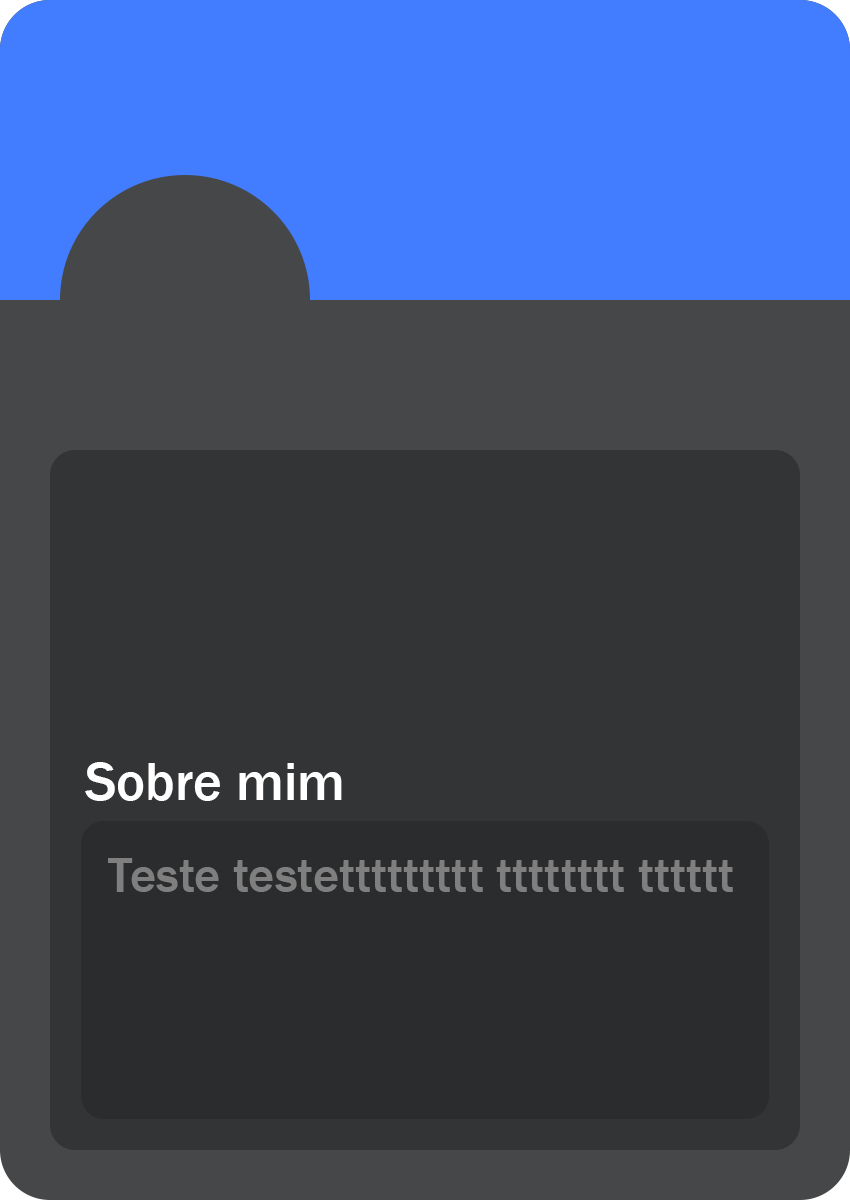
<style>
.page{position:relative;width:850px;height:1200px;background:#333435}
.page>*{position:absolute;margin:0}
.t1{font:55px "FranklinGothic-Medium";color:#ffffff}
.t2{font:50px "FranklinGothic-Medium";color:#7f7f7f}
</style>
<div class="page">
<p class="t1" style="left:85px;top:762px;width:257px;height:39px">Sobre mim</p>
<p class="t2" style="left:108px;top:858px;width:625px;height:34px">Teste testettttttttt tttttttt tttttt</p>
</div>
